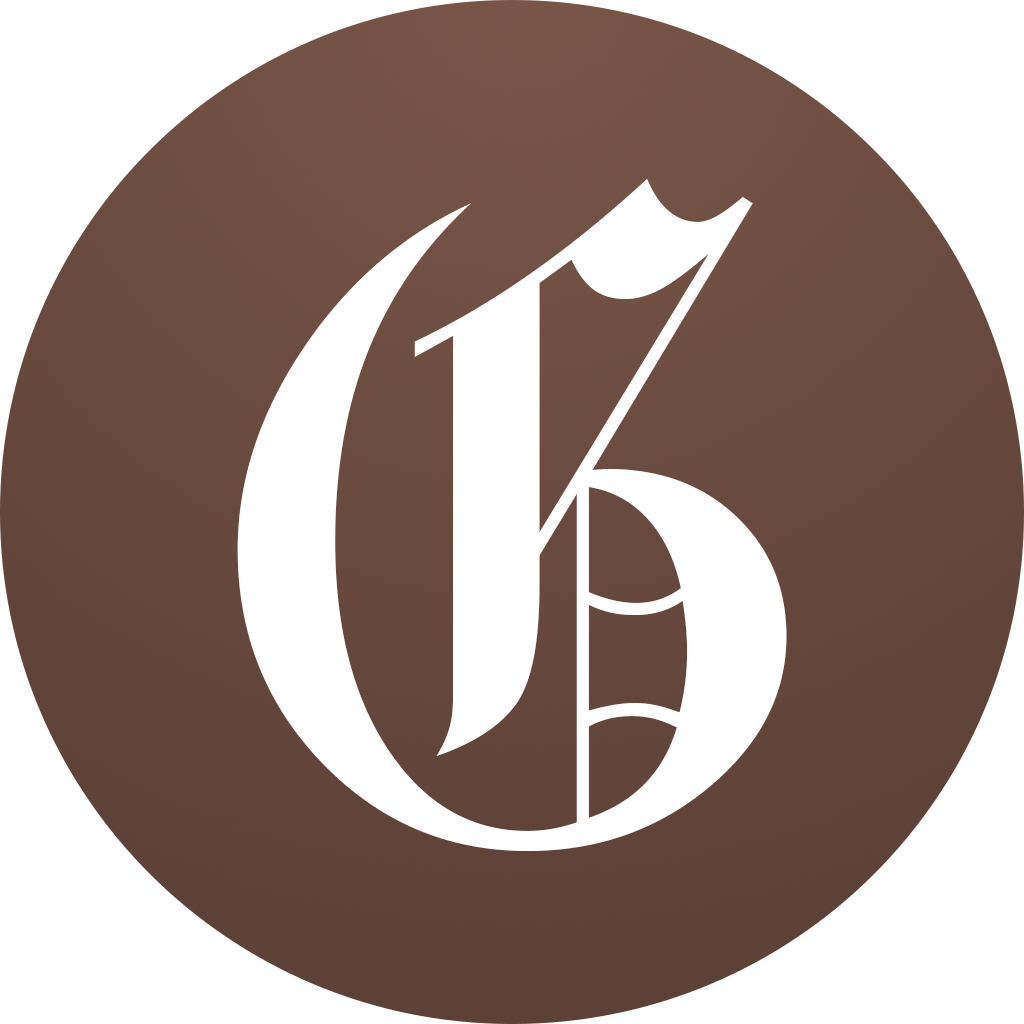
<style>
.page{position:relative;width:1024px;height:1024px;background:#ffffff}
.page>*{position:absolute;margin:0}
.t1{font:920.6px "EngraversOldEnglishBT-Regular";color:#ffffff}
</style>
<div class="page">
<p class="t1" style="left:237px;top:179px;width:550px;height:672px">G</p>
</div>
